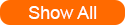
<style>
.page{position:relative;width:125px;height:25px;background:#ff6a00}
.page>*{position:absolute;margin:0}
.t1{font:18px "ArialMT";color:#ffffff}
</style>
<div class="page">
<p class="t1" style="left:29px;top:6px;width:68px;height:13px">Show All</p>
</div>
